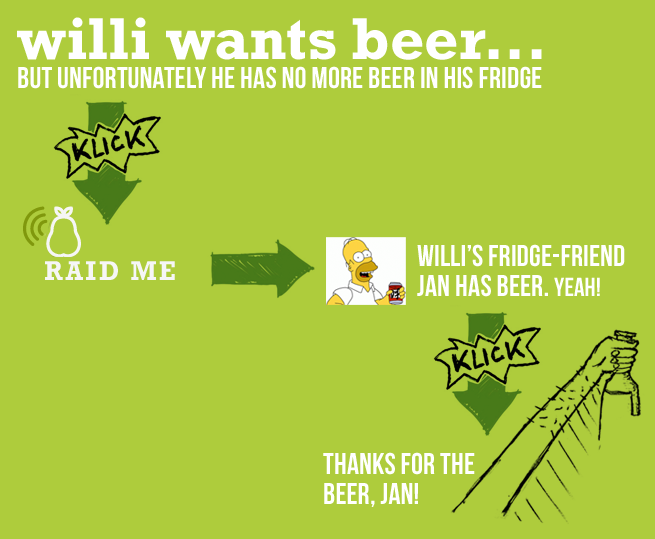
<style>
.page{position:relative;width:655px;height:539px;background:#aecc3c}
.page>*{position:absolute;margin:0}
.t1{font:60px "RockwellStd-Bold";color:#ffffff}
.t2{font:30px "BebasNeue";letter-spacing:0.005em;color:#ffffff}
.t3{font:30px/30px "BebasNeue";letter-spacing:0.005em;color:#ffffff}
.t4{font:26px/30px "BebasNeue";letter-spacing:0.005em;color:#ffffff}
</style>
<div class="page">
<p class="t1" style="left:17px;top:17px;width:525px;height:43px">willi wants beer...</p>
<p class="t2" style="left:18px;top:66px;width:524px;height:23px">but unfortunately he has no more beer in his fridge</p>
<p class="t3" style="left:417px;top:244px;width:208px;height:53px">Willi’s fridge-friend Jan has beeR. <span class="t4">YEAH!</span></p>
<p class="t3" style="left:323px;top:452px;width:152px;height:55px">thanks for the beer, Jan!</p>
</div>
